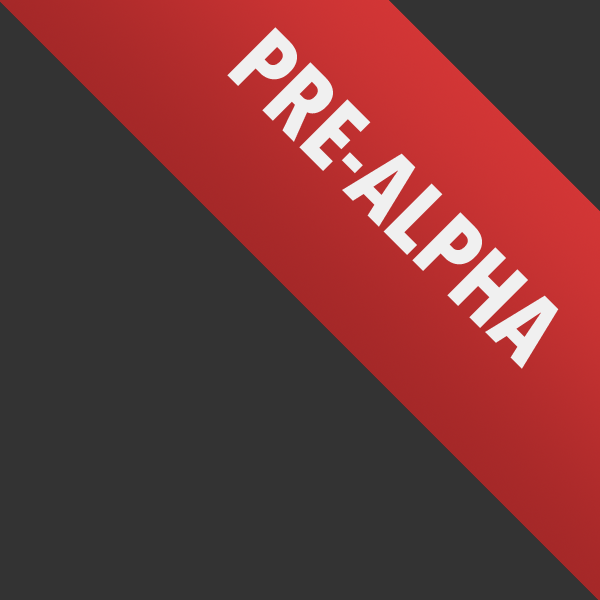
<style>
.page{position:relative;width:600px;height:600px;background:#333333}
.page>*{position:absolute;margin:0}
.t1{font:96px "AvenirNextCondensed-Bold";color:#f0f0f0}
</style>
<div class="page">
<p class="t1" style="left:227px;top:27px;width:332px;height:342px;rotate:45deg">PRE-ALPHA</p>
</div>
